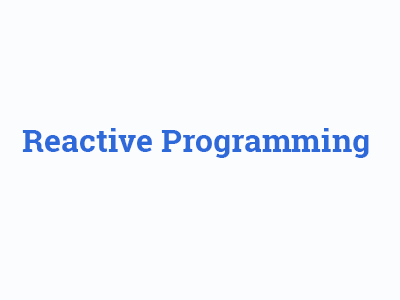
<style>
.page{position:relative;width:400px;height:300px;background:#fafcfd}
.page>*{position:absolute;margin:0}
.t1{font:32px "RobotoSlab-Bold";color:#2d69d8}
</style>
<div class="page">
<p class="t1" style="left:22px;top:128px;width:347px;height:30px">Reactive Programming</p>
</div>
